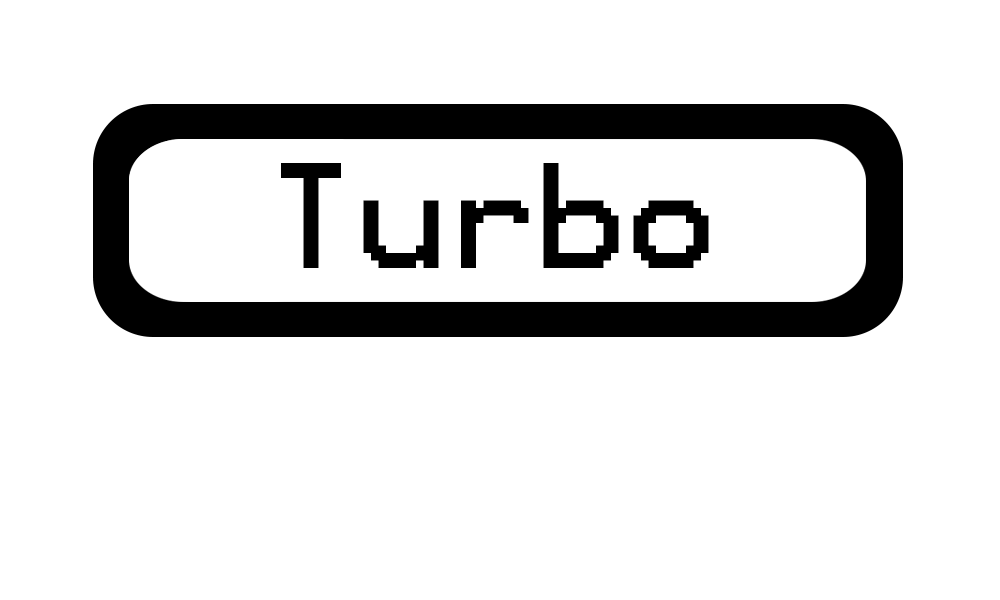
<style>
.page{position:relative;width:1000px;height:600px;background:#ffffff}
.page>*{position:absolute;margin:0}
.t1{font:120px "Terminal";color:#000000}
</style>
<div class="page">
<p class="t1" style="left:281px;top:163px;width:428px;height:105px">Turbo</p>
</div>
